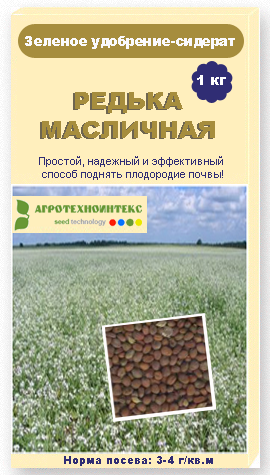
<style>
.page{position:relative;width:270px;height:475px;background:#ffefbd}
.page>*{position:absolute;margin:0}
.t1{font:14px "Arial-Black";color:#fafafd;scale:0.95 1}
.t2{font:14px "Arial-Black";color:#fdfdfe}
.t3{font:24px "Arial-Black";color:#a68d3d}
.t4{font:11px "ArialMT";color:#302d74}
.t5{font:11px "Arial-Black";color:#302d74}
</style>
<div class="page">
<p class="t1" style="left:25px;top:36px;width:210px;height:13px">Зеленое удобрение-сидерат</p>
<p class="t2" style="left:197px;top:75px;width:29px;height:10px">1 кг</p>
<p class="t3" style="left:42px;top:92px;width:173px;height:46px;text-align:center">РЕДЬКА<br>МАСЛИЧНАЯ</p>
<p class="t4" style="left:39px;top:156px;width:184px;height:24px;text-align:center">Простой, надежный и эффективный<br> способ поднять плодородие почвы!</p>
<p class="t5" style="left:64px;top:456px;width:149px;height:10px">Норма посева: 3-4 г/кв.м</p>
</div>
